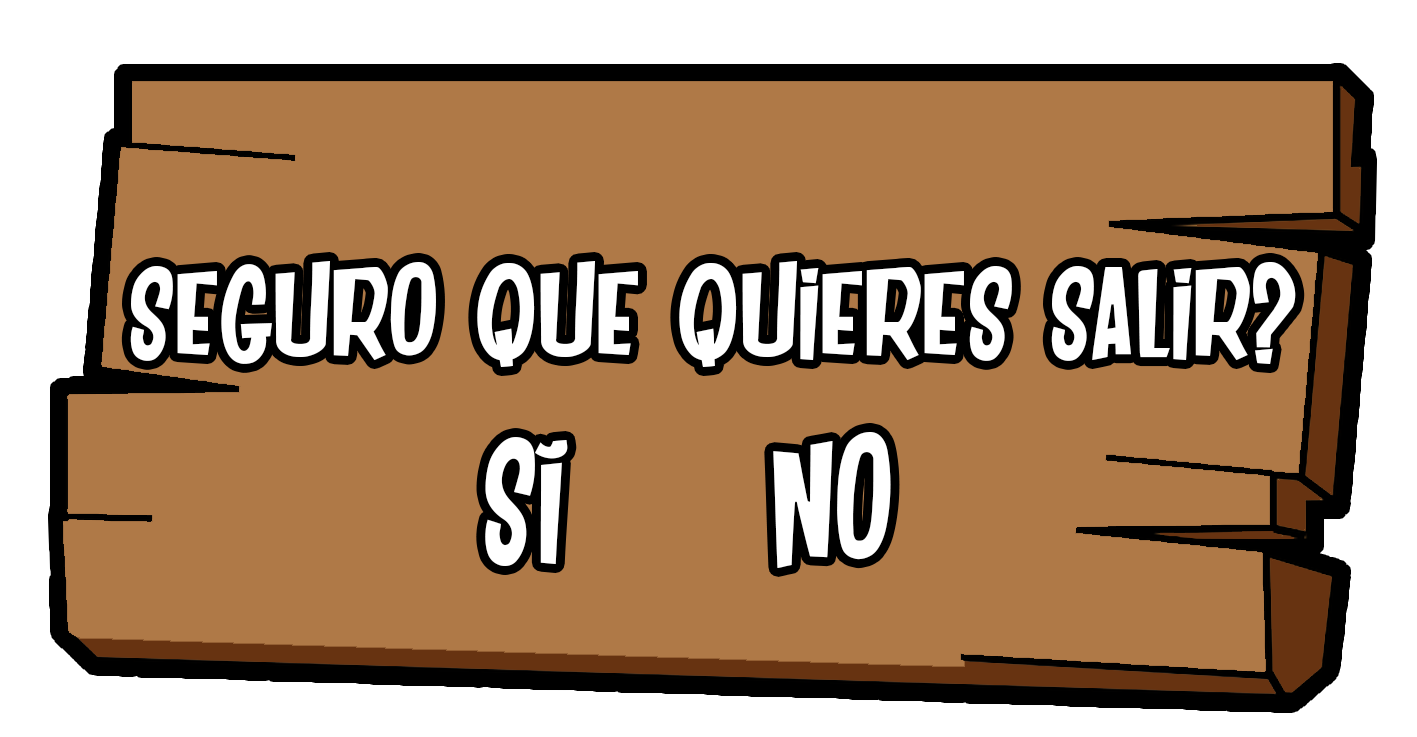
<style>
.page{position:relative;width:1417px;height:737px;background:#af7947}
.page>*{position:absolute;margin:0}
.t1{font:125px "DANCING-JUNGLE";color:#ffffff;scale:1.15 1}
.t2{font:170px "DANCING-JUNGLE";color:#ffffff}
</style>
<div class="page">
<p class="t1" style="left:130px;top:261px;width:1166px;height:106px">SEGURO QUE QUIERES SALIR?</p>
<p class="t2" style="left:485px;top:432px;width:406px;height:136px">SÍ     NO</p>
</div>
